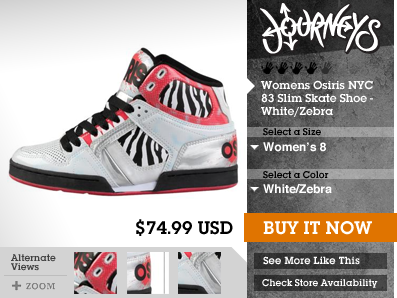
<style>
.page{position:relative;width:397px;height:298px}
.page>*{position:absolute;margin:0}
.t1{font:12px/13px "LubalinGraphITC-Demi";color:#ffffff}
.t2{font:10px "LubalinGraphITC-Demi";color:#000000}
.t3{font:12px "Helvetica-Bold";color:#ffffff}
.t4{font:19px "LubalinGraphITC-Demi";color:#000000}
.t5{font:19px "LubalinGraphITC-Demi";color:#ffffff}
.t6{font:10px/9px "LubalinGraphITC-Demi";color:#3f3f3f}
.t7{font:10px "LubalinGraphITCbyBT-Demi";color:#ffffff}
.t8{font:10px "LubalinGraphITC-Demi";color:#ffffff}
</style>
<div class="page">
<p class="t1" style="left:261px;top:80px;width:112px;height:37px">Womens Osiris NYC 83 Slim Skate Shoe - White/Zebra</p>
<p class="t2" style="left:263px;top:128px;width:58px;height:8px">Select a Size</p>
<p class="t3" style="left:263px;top:142px;width:63px;height:10px">Women’s 8</p>
<p class="t2" style="left:263px;top:171px;width:66px;height:8px">Select a Color</p>
<p class="t3" style="left:263px;top:184px;width:69px;height:10px">White/Zebra</p>
<p class="t4" style="left:136px;top:219px;width:97px;height:17px">$74.99 USD</p>
<p class="t5" style="left:263px;top:221px;width:109px;height:14px">BUY IT NOW</p>
<p class="t6" style="left:11px;top:254px;width:45px;height:17px">Alternate<br>Views</p>
<p class="t7" style="left:263px;top:256px;width:97px;height:9px">See More Like This</p>
<p class="t8" style="left:262px;top:279px;width:116px;height:9px">Check Store Availability</p>
</div>
